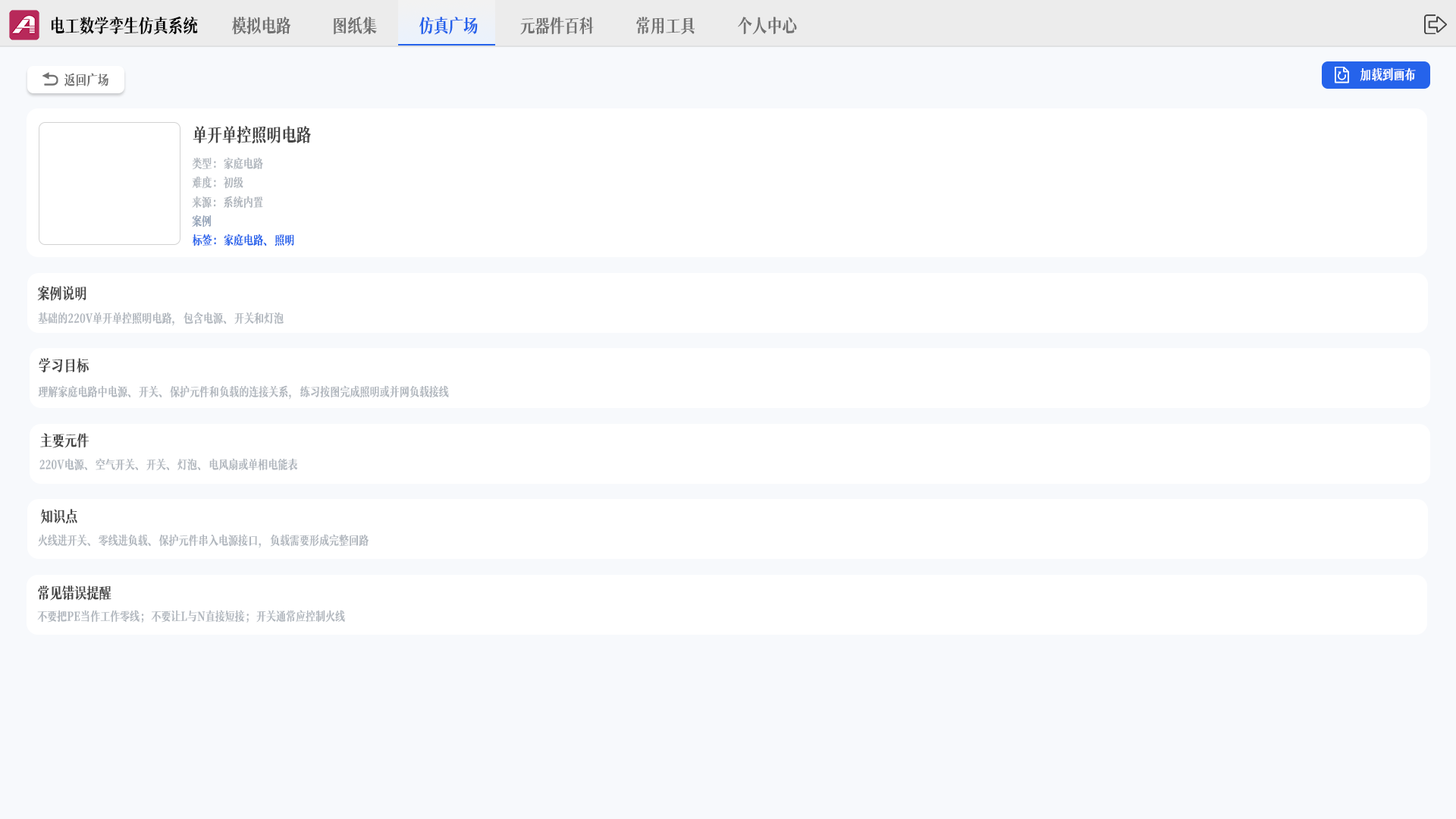
<style>
.page{position:relative;width:1456px;height:819px;background:#ffffff}
.page>*{position:absolute;margin:0}
.t1{font:18.2px "MaoKenWangFengYaSong";color:#020202}
.t2{font:18.2px "MaoKenWangFengYaSong";color:#727272}
.t3{font:18.2px "MaoKenWangFengYaSong";color:#2563eb}
.t4{font:13.6px "MaoKenWangFengYaSong";color:#727272}
.t5{font:13.6px "MaoKenWangFengYaSong";color:#ffffff}
.t6{font:18.2px "MaoKenWangFengYaSong";color:#464646}
.t7{font:12.1px "MaoKenWangFengYaSong";color:#b1b7be}
.t8{font:12.1px "MaoKenWangFengYaSong";color:#94a3b8}
.t9{font:12.1px "MaoKenWangFengYaSong";color:#2563eb}
.t10{font:15.2px "MaoKenWangFengYaSong";color:#464646}
</style>
<div class="page">
<p class="t1" style="left:52px;top:16px;width:146px;height:19px">电工数学孪生仿真系统</p>
<p class="t2" style="left:232px;top:17px;width:59px;height:18px">模拟电路</p>
<p class="t2" style="left:334px;top:16px;width:43px;height:19px">图纸集</p>
<p class="t3" style="left:419px;top:17px;width:59px;height:18px">仿真广场</p>
<p class="t2" style="left:520px;top:17px;width:74px;height:18px">元器件百科</p>
<p class="t2" style="left:636px;top:17px;width:59px;height:18px">常用工具</p>
<p class="t2" style="left:738px;top:17px;width:59px;height:18px">个人中心</p>
<p class="t4" style="left:64px;top:73px;width:44px;height:13px">返回广场</p>
<p class="t5" style="left:1360px;top:67px;width:56px;height:14px">加载到画布</p>
<p class="t6" style="left:193px;top:126px;width:118px;height:18px">单开单控照明电路</p>
<p class="t7" style="left:192px;top:157px;width:71px;height:13px">类型：家庭电路</p>
<p class="t7" style="left:192px;top:176px;width:51px;height:13px">难度：初级</p>
<p class="t7" style="left:192px;top:196px;width:71px;height:13px">来源：系统内置</p>
<p class="t8" style="left:192px;top:215px;width:19px;height:12px">案例</p>
<p class="t9" style="left:193px;top:234px;width:101px;height:12px">标签：家庭电路、照明</p>
<p class="t10" style="left:37px;top:286px;width:49px;height:15px">案例说明</p>
<p class="t7" style="left:38px;top:312px;width:246px;height:14px">基础的220V单开单控照明电路，包含电源、开关和灯泡</p>
<p class="t10" style="left:39px;top:358px;width:50px;height:15px">学习目标</p>
<p class="t7" style="left:38px;top:385px;width:411px;height:15px">理解家庭电路中电源、开关、保护元件和负载的连接关系，练习按图完成照明或并网负载接线</p>
<p class="t10" style="left:40px;top:433px;width:49px;height:15px">主要元件</p>
<p class="t7" style="left:39px;top:458px;width:259px;height:13px">220V电源、空气开关、开关、灯泡、电风扇或单相电能表</p>
<p class="t10" style="left:41px;top:509px;width:36px;height:15px">知识点</p>
<p class="t7" style="left:38px;top:534px;width:331px;height:14px">火线进开关、零线进负载、保护元件串入电源接口，负载需要形成完整回路</p>
<p class="t10" style="left:38px;top:585px;width:73px;height:16px">常见错误提醒</p>
<p class="t7" style="left:37px;top:610px;width:308px;height:13px">不要把PE当作工作零线；不要让L与N直接短接；开关通常应控制火线</p>
</div>
